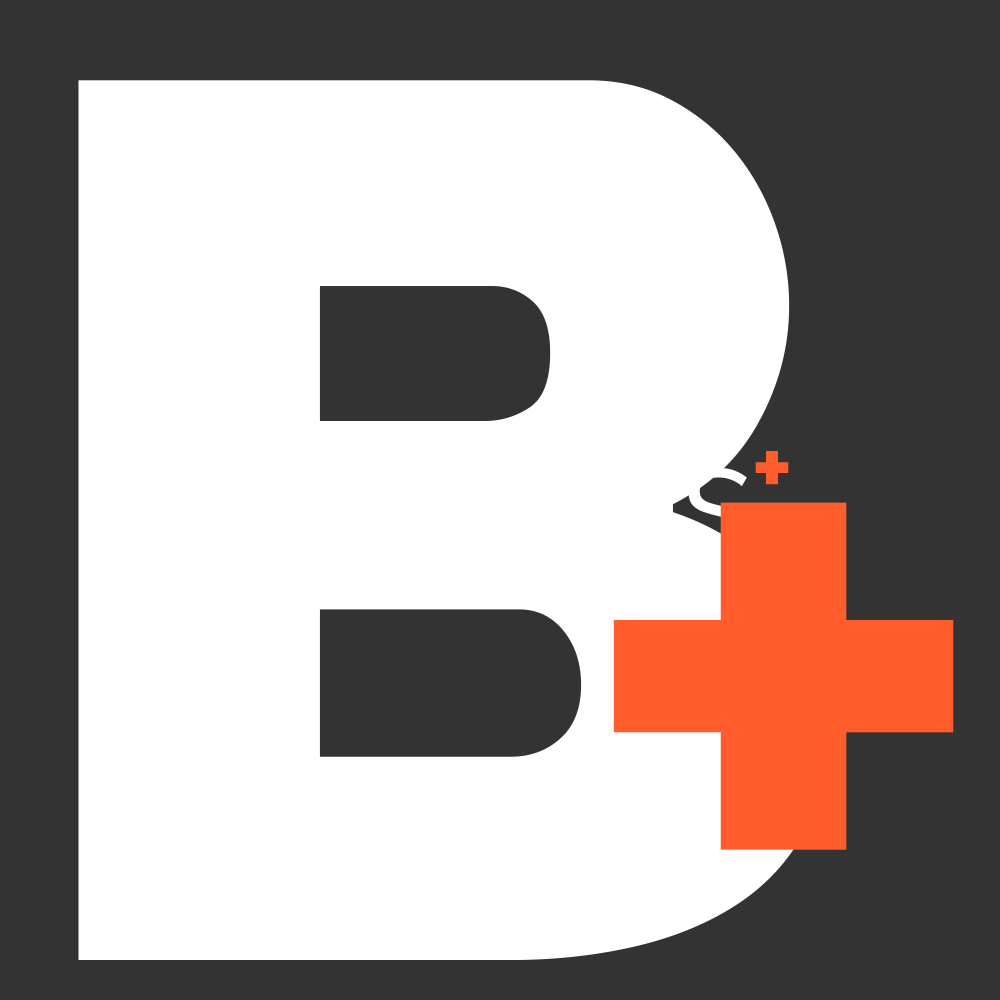
<style>
.page{position:relative;width:1000px;height:1000px;background:#ffffff}
.page>*{position:absolute;margin:0}
.t1{font:1239.4px "Raleway-Black";color:#ffffff}
.t2{font:99.8px "Raleway-Bold";color:#ff5e2c}
.t3{font:1039px "Raleway-Bold";color:#ff5e2c}
</style>
<div class="page">
<p class="t1" style="left:78px;top:80px;width:749px;height:880px">B</p>
<p class="t2" style="left:755px;top:451px;width:34px;height:34px">+</p>
<p class="t3" style="left:613px;top:502px;width:341px;height:348px">+</p>
</div>
